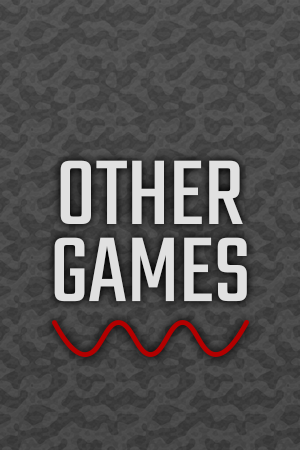
<style>
.page{position:relative;width:300px;height:450px}
.page>*{position:absolute;margin:0}
.t1{font:101px/77px "Teko-Regular";color:#e0e0e0}
</style>
<div class="page">
<p class="t1" style="left:54px;top:160px;width:193px;height:142px;text-align:center">OTHER<br>GAMES</p>
</div>
